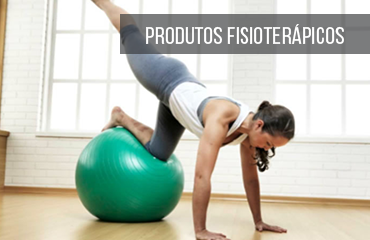
<style>
.page{position:relative;width:370px;height:240px}
.page>*{position:absolute;margin:0}
.t1{font:24px "BebasNeueRegular";letter-spacing:0.02em;color:#ffffff}
</style>
<div class="page">
<p class="t1" style="left:146px;top:24px;width:198px;height:20px">Produtos Fisioterápicos</p>
</div>
